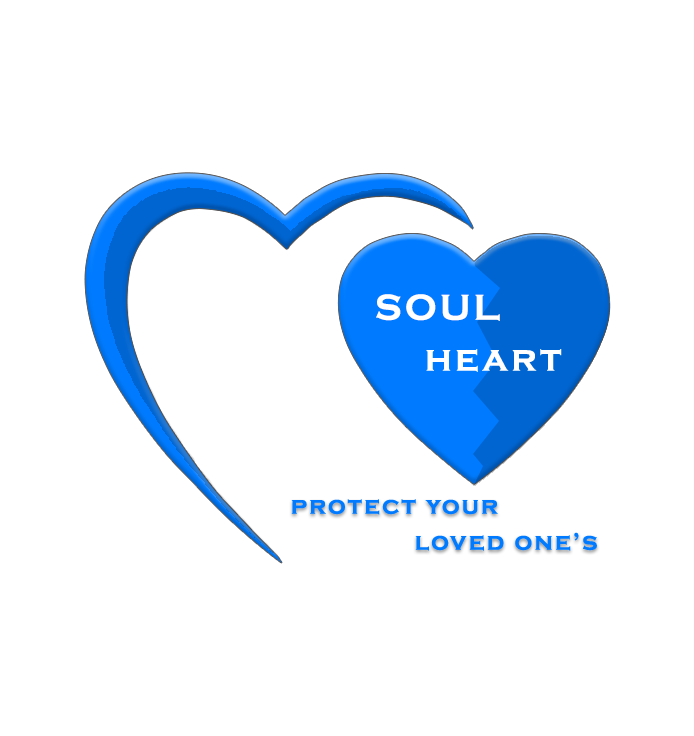
<style>
.page{position:relative;width:694px;height:736px;background:#ffffff}
.page>*{position:absolute;margin:0}
.t1{font:37.5px "CopperplateGothic-Bold";letter-spacing:0.08em;color:#ffffff}
.t2{font:25px "CopperplateGothic-Bold";letter-spacing:0.08em;color:#007bff}
</style>
<div class="page">
<p class="t1" style="left:376px;top:294px;width:124px;height:27px">SOUL</p>
<p class="t2" style="left:291px;top:499px;width:207px;height:16px">protect your</p>
<p class="t2" style="left:415px;top:532px;width:182px;height:19px">loved one’s</p>
</div>
